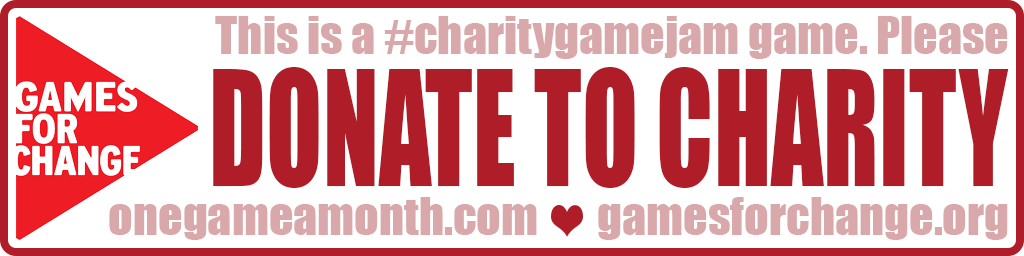
<style>
.page{position:relative;width:1024px;height:256px;background:#ffffff}
.page>*{position:absolute;margin:0}
.t1{font:48px "Impact";color:#d9a8aa}
.t2{font:147.7px "Impact";color:#af1d28;scale:0.7 1}
</style>
<div class="page">
<p class="t1" style="left:215px;top:16px;width:793px;height:43px">This is a #charitygamejam game. Please</p>
<p class="t2" style="left:213px;top:67px;width:796px;height:121px">DONATE TO CHARITY</p>
<p class="t1" style="left:109px;top:197px;width:899px;height:43px">onegameamonth.com       gamesforchange.org</p>
</div>
